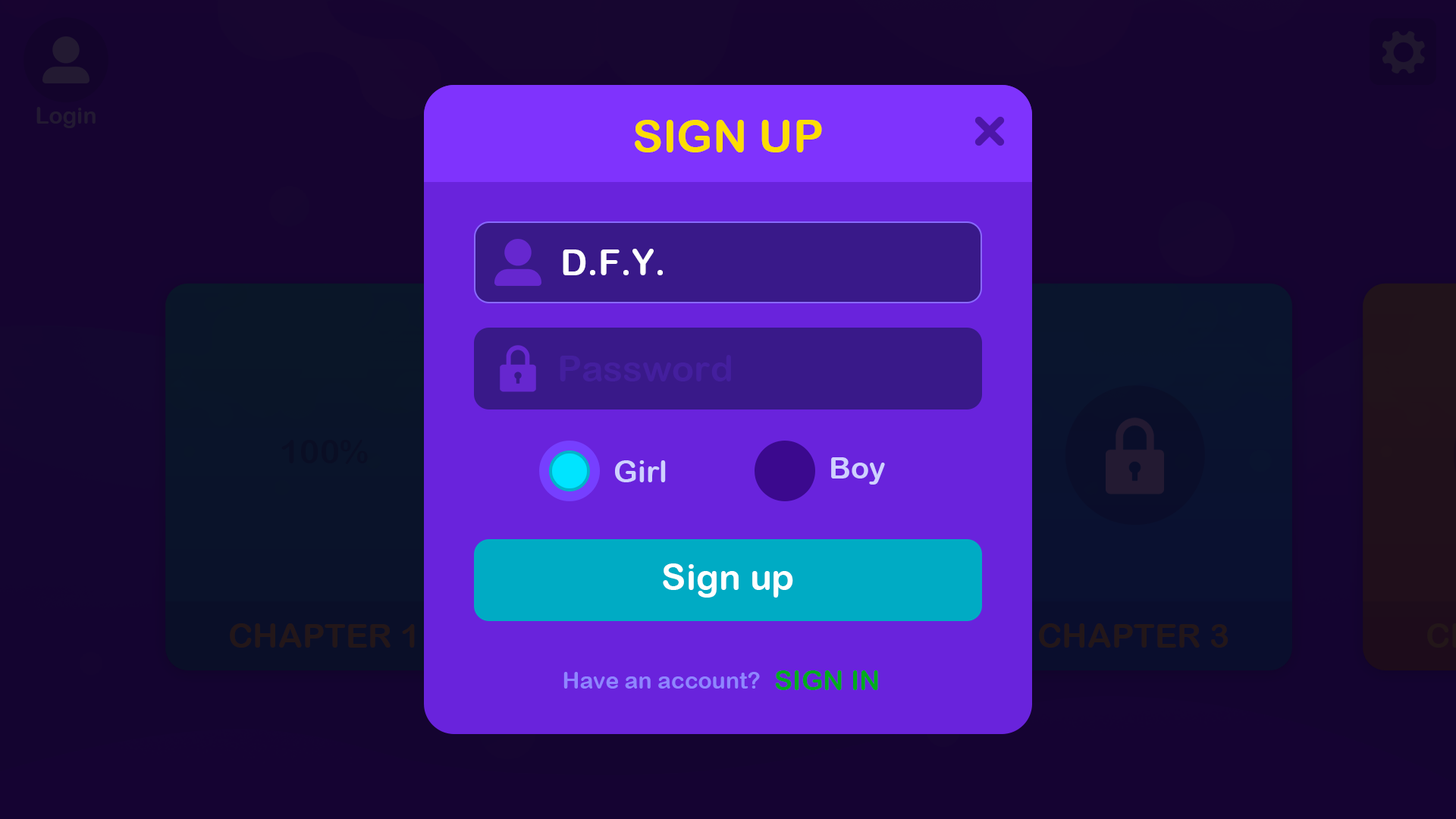
<style>
.page{position:relative;width:1456px;height:819px}
.page>*{position:absolute;margin:0}
.t1{font:45.5px "ArialRoundedMTBold";color:#fddd02}
.t2{font:36.4px "ArialRoundedMTBold";color:#ffffff}
.t3{font:36.4px "ArialRoundedMTBold";color:#441f9e}
.t4{font:30.3px "ArialRoundedMTBold";color:#cfd1ff}
.t5{font:22.7px "ArialRoundedMTBold";color:#8f86ff}
.t6{font:27.3px "ArialRoundedMTBold";color:#01ac1c}
</style>
<div class="page">
<p class="t1" style="left:635px;top:120px;width:187px;height:32px">SIGN UP</p>
<p class="t2" style="left:563px;top:249px;width:100px;height:26px">D.F.Y.</p>
<p class="t3" style="left:560px;top:355px;width:171px;height:26px">Password</p>
<p class="t4" style="left:615px;top:460px;width:51px;height:22px">Girl</p>
<p class="t4" style="left:831px;top:457px;width:54px;height:28px">Boy</p>
<p class="t2" style="left:663px;top:563px;width:130px;height:35px">Sign up</p>
<p class="t5" style="left:563px;top:672px;width:197px;height:17px">Have an account?</p>
<p class="t6" style="left:775px;top:670px;width:103px;height:20px">SIGN IN</p>
</div>
